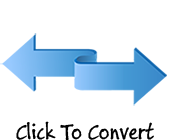
<style>
.page{position:relative;width:170px;height:140px;background:#ffffff}
.page>*{position:absolute;margin:0}
.t1{font:24px "BuxtonSketch";color:#020202}
</style>
<div class="page">
<p class="t1" style="left:16px;top:121px;width:138px;height:20px">Click To Convert</p>
</div>
